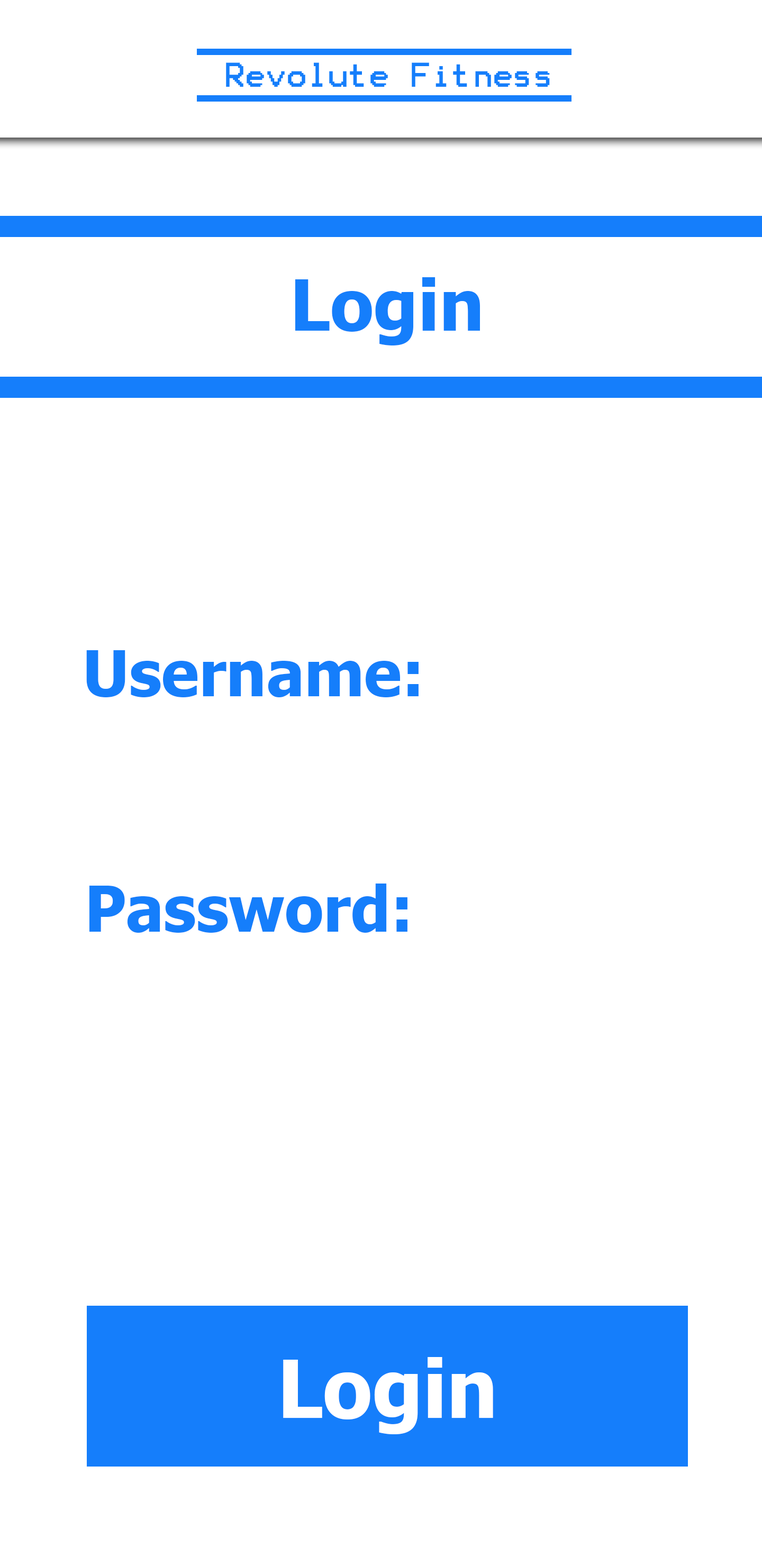
<style>
.page{position:relative;width:762px;height:1566px;background:#ffffff}
.page>*{position:absolute;margin:0}
.t1{font:27.5px "Terminal";color:#157efb}
.t2{font:70.3px "Tahoma-Bold";color:#157efb}
.t3{font:62.9px "Tahoma-Bold";color:#157efb}
.t4{font:79.9px "Tahoma-Bold";color:#ffffff}
</style>
<div class="page">
<p class="t1" style="left:226px;top:62px;width:324px;height:25px">Revolute Fitness</p>
<p class="t2" style="left:295px;top:277px;width:185px;height:68px">Login</p>
<p class="t3" style="left:86px;top:650px;width:332px;height:47px">Username:</p>
<p class="t3" style="left:89px;top:883px;width:318px;height:49px">Password:</p>
<p class="t4" style="left:283px;top:1357px;width:210px;height:77px">Login</p>
</div>
